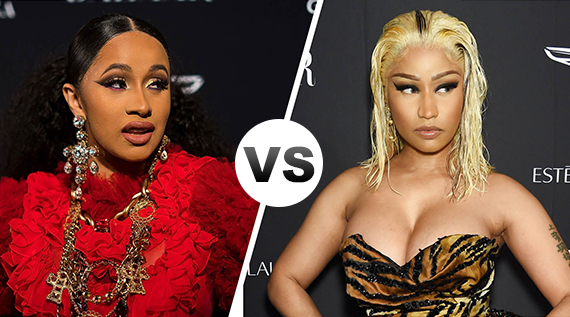
<style>
.page{position:relative;width:570px;height:317px}
.page>*{position:absolute;margin:0}
.t1{font:48.8px "Arial-Black"}
</style>
<div class="page">
<p class="t1" style="left:243px;top:146px;width:72px;height:37px">VS</p>
</div>
